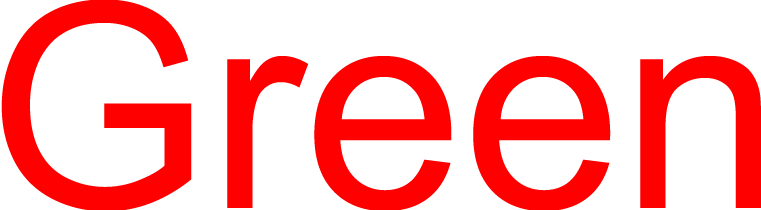
<style>
.page{position:relative;width:761px;height:210px;background:#ffffff}
.page>*{position:absolute;margin:0}
.t1{font:286px "ArialMT";color:#ff0000}
</style>
<div class="page">
<p class="t1" style="left:1px;top:0px;width:760px;height:212px">Green</p>
</div>
